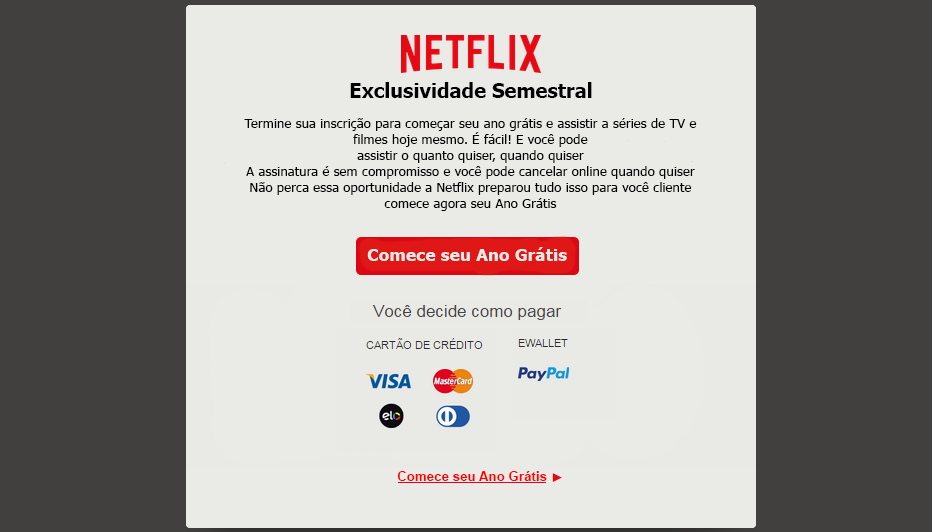
<style>
.page{position:relative;width:932px;height:532px;background:#eaeae6}
.page>*{position:absolute;margin:0}
.t1{font:20px "Tahoma-Bold";color:#000000}
.t2{font:13.3px "Tahoma";color:#000000}
.t3{font:17.3px "Tahoma-Bold";color:#eaeae6}
.t4{font:13.3px "Arial-BoldMT";color:#ff0000}
</style>
<div class="page">
<p class="t1" style="left:350px;top:82px;width:242px;height:16px">Exclusividade Semestral</p>
<p class="t2" style="left:244px;top:118px;width:453px;height:93px;text-align:center">Termine sua inscrição para começar seu ano grátis e assistir a séries de TV e filmes hoje mesmo. É fácil! E você pode<br>assistir o quanto quiser, quando quiser<br>A assinatura é sem compromisso e você pode cancelar online quando quiser<br>Não perca essa oportunidade a Netflix preparou tudo isso para você cliente comece agora seu Ano Grátis</p>
<p class="t3" style="left:367px;top:247px;width:200px;height:14px">Comece seu Ano Grátis</p>
<p class="t4" style="left:397px;top:471px;width:150px;height:10px">Comece seu Ano Grátis</p>
</div>
